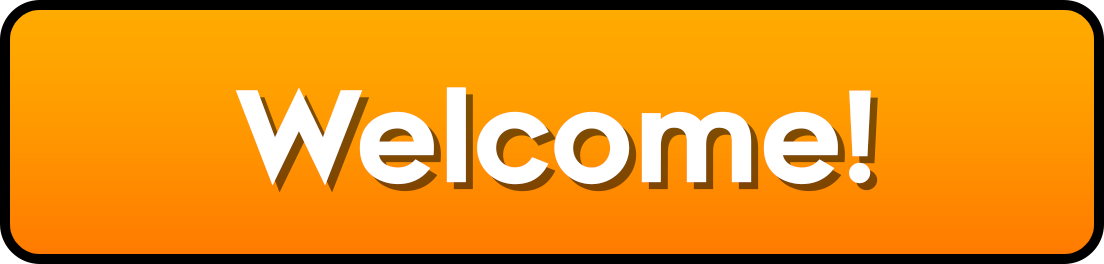
<style>
.page{position:relative;width:1104px;height:264px}
.page>*{position:absolute;margin:0}
.t1{font:124.9px "Renogare-Regular";letter-spacing:-0.05em;color:#ffffff;font-weight:bold}
</style>
<div class="page">
<p class="t1" style="left:235px;top:87px;width:636px;height:99px">Welcome!</p>
</div>
